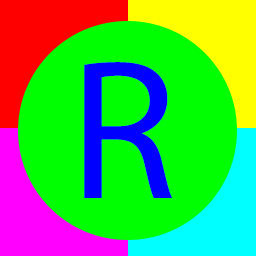
<style>
.page{position:relative;width:256px;height:256px;background:#00ff00}
.page>*{position:absolute;margin:0}
.t1{font:200px "MyriadPro-Regular";color:#0000ff}
</style>
<div class="page">
<p class="t1" style="left:84px;top:62px;width:89px;height:136px">R</p>
</div>
